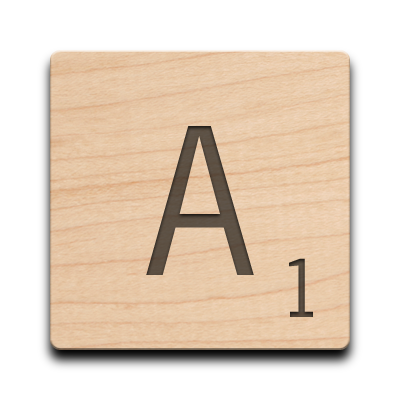
<style>
.page{position:relative;width:400px;height:400px;background:#ffffff}
.page>*{position:absolute;margin:0}
.t1{font:191.7px "NewsGothicStd";color:#5c4f42}
.t2{font:75px "NewsGothicStd";color:#504439}
</style>
<div class="page">
<p class="t1" style="left:146px;top:126px;width:108px;height:149px">A</p>
<p class="t2" style="left:289px;top:258px;width:24px;height:59px">1</p>
</div>
